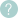
<style>
.page{position:relative;width:18px;height:18px;background:#abd0ce}
.page>*{position:absolute;margin:0}
.t1{font:14.7px "Gulim";color:#ffffff}
</style>
<div class="page">
<p class="t1" style="left:5px;top:3px;width:7px;height:12px">?</p>
</div>
